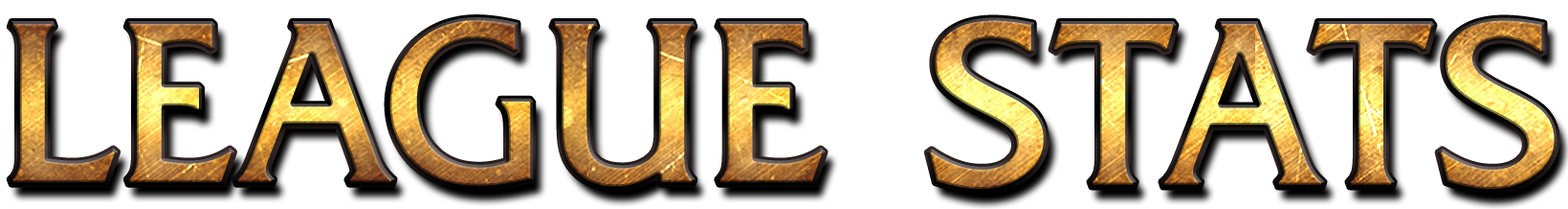
<style>
.page{position:relative;width:1568px;height:209px;background:#ffffff}
.page>*{position:absolute;margin:0}
.t1{font:231.2px "FrizQuadrataITCbyBT-Roman";font-weight:bold}
.t2{font:235.2px "FrizQuadrataITCbyBT-Roman";font-weight:bold}
</style>
<div class="page">
<p class="t1" style="left:9px;top:17px;width:817px;height:172px">LEAGUE</p>
<p class="t2" style="left:926px;top:17px;width:631px;height:174px">STATS</p>
</div>
